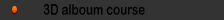
<style>
.page{position:relative;width:224px;height:20px;background:#333333}
.page>*{position:absolute;margin:0}
.t1{font:14.9px "ArialRoundedMTBold";color:#030303;scale:0.78 1}
</style>
<div class="page">
<p class="t1" style="left:43px;top:4px;width:102px;height:11px">3D alboum course</p>
</div>
